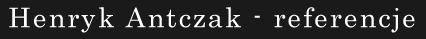
<style>
.page{position:relative;width:426px;height:39px;background:#1a1a1a}
.page>*{position:absolute;margin:0}
.t1{font:27px "Century";letter-spacing:0.075em;color:#ffffff}
.t2{font:21.9px "LucidaConsole";letter-spacing:0.075em;color:#ffffff;font-weight:bold}
</style>
<div class="page">
<p class="t1" style="left:9px;top:7px;width:406px;height:26px"><span class="t2"><br></span><br>Henryk Antczak - referencje</p>
</div>
